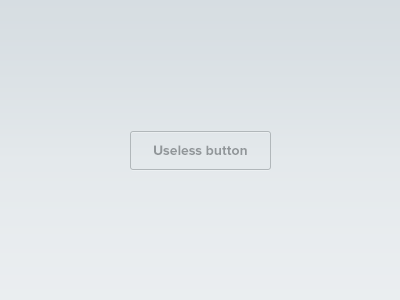
<style>
.page{position:relative;width:400px;height:300px}
.page>*{position:absolute;margin:0}
.t1{font:14px "ProximaNova-Bold";color:#919699}
</style>
<div class="page">
<p class="t1" style="left:154px;top:145px;width:93px;height:10px">Useless button</p>
</div>
